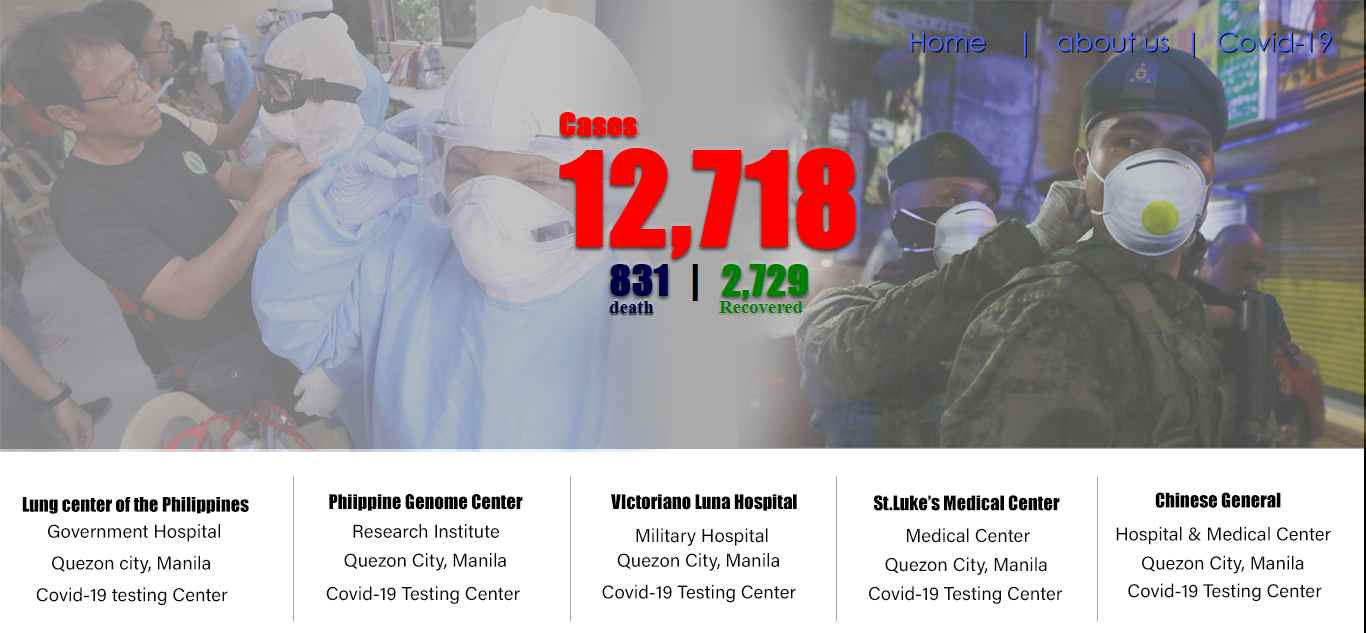
<style>
.page{position:relative;width:1366px;height:633px;background:#ffffff}
.page>*{position:absolute;margin:0}
.t1{font:26.7px "CenturyGothic";color:#4c6cfc}
.t2{font:26.7px "CenturyGothic"}
.t3{font:18.7px "Impact";color:#000000}
.t4{font:18.7px "AcuminConcept-Regular";color:#060914}
</style>
<div class="page">
<p class="t1" style="left:910px;top:31px;width:421px;height:26px">Home |   about us  |  Covid-19</p>
<p class="t2" style="left:911px;top:32px;width:421px;height:26px">Home |   about us  |  Covid-19</p>
<p class="t3" style="left:22px;top:497px;width:227px;height:17px">Lung center of the Philippines</p>
<p class="t3" style="left:329px;top:494px;width:194px;height:17px">Phiippine Genome Center</p>
<p class="t3" style="left:611px;top:494px;width:186px;height:17px">VIctoriano Luna Hospital</p>
<p class="t3" style="left:874px;top:495px;width:186px;height:16px">St.Luke’s Medical Center</p>
<p class="t3" style="left:1155px;top:492px;width:126px;height:16px">Chinese General</p>
<p class="t4" style="left:48px;top:524px;width:172px;height:18px">Government Hospital</p>
<p class="t4" style="left:353px;top:524px;width:146px;height:14px">Research Institute</p>
<p class="t4" style="left:636px;top:528px;width:132px;height:18px">Military Hospital</p>
<p class="t4" style="left:907px;top:528px;width:123px;height:15px">Medical Center</p>
<p class="t4" style="left:1116px;top:526px;width:215px;height:19px">Hospital &amp; Medical Center</p>
<p class="t4" style="left:52px;top:555px;width:158px;height:19px">Quezon city, Manila</p>
<p class="t4" style="left:344px;top:553px;width:162px;height:18px">Quezon City, Manila</p>
<p class="t4" style="left:617px;top:553px;width:162px;height:18px">Quezon City, Manila</p>
<p class="t4" style="left:885px;top:557px;width:162px;height:18px">Quezon City, Manila</p>
<p class="t4" style="left:1142px;top:555px;width:162px;height:19px">Quezon City, Manila</p>
<p class="t4" style="left:36px;top:587px;width:192px;height:19px">Covid-19 testing Center</p>
<p class="t4" style="left:326px;top:586px;width:194px;height:18px">Covid-19 Testing Center</p>
<p class="t4" style="left:602px;top:584px;width:194px;height:19px">Covid-19 Testing Center</p>
<p class="t4" style="left:869px;top:586px;width:193px;height:18px">Covid-19 Testing Center</p>
<p class="t4" style="left:1128px;top:583px;width:194px;height:19px">Covid-19 Testing Center</p>
</div>
